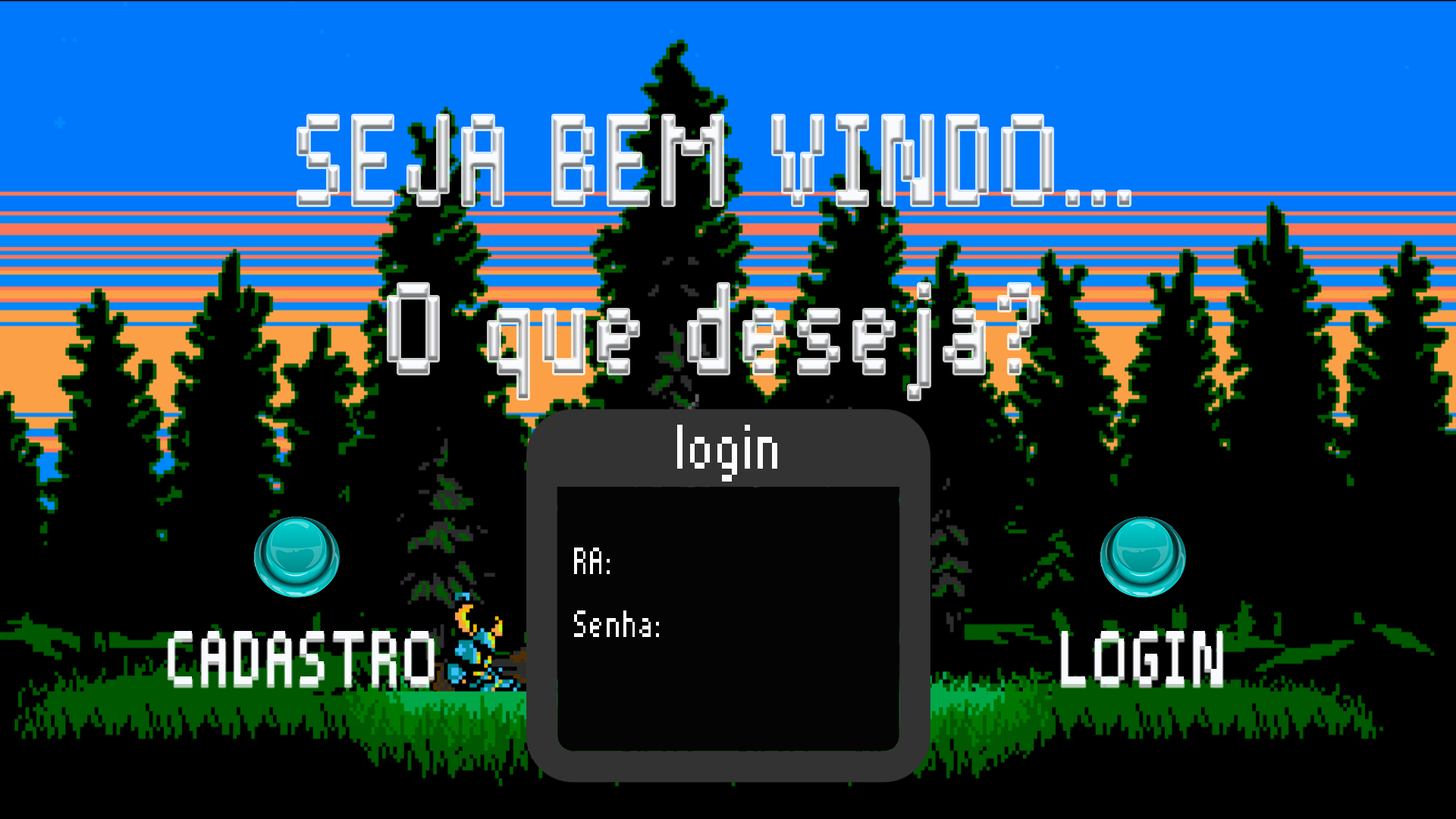
<style>
.page{position:relative;width:1456px;height:819px;background:#000000}
.page>*{position:absolute;margin:0}
.t1{font:164.3px/21.1px "Pixelade";letter-spacing:0.05em;scale:0.77 1}
.t2{font:49.3px/21.1px "Pixelade";letter-spacing:0.05em;color:#fffcfc;scale:0.77 1}
.t3{font:82.2px/21.1px "Pixelade";letter-spacing:0.05em;color:#fffcfc;scale:0.77 1}
.t4{font:98.6px "Pixelade";letter-spacing:0.05em;color:#f8fafd;scale:0.77 1}
</style>
<div class="page">
<p class="t1" style="left:299px;top:116px;width:830px;height:283px;text-align:center">SEJA BEM VINDO...<br><br><br><br><br><br><br><br>O que deseja?</p>
<p class="t2" style="left:574px;top:425px;width:203px;height:212px;text-align:center"><span class="t3">login<br><br></span><br><br><br>RA:<br><br><br>Senha:</p>
<p class="t4" style="left:168px;top:631px;width:266px;height:53px">CADASTRO</p>
<p class="t4" style="left:1062px;top:631px;width:160px;height:53px">LOGIN</p>
</div>
